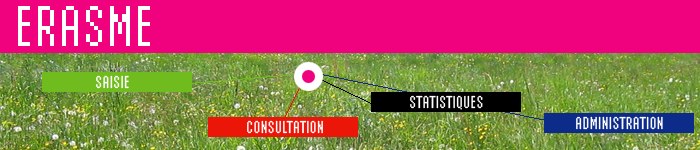
<style>
.page{position:relative;width:700px;height:150px;background:#f0027f}
.page>*{position:absolute;margin:0}
.t1{font:60px "LoResFifTeenNarrow";color:#ffffff}
.t2{font:18px "LoResFifTeenNarrow";color:#ffffff}
</style>
<div class="page">
<p class="t1" style="left:18px;top:6px;width:132px;height:40px">ERASME</p>
<p class="t2" style="left:96px;top:75px;width:33px;height:14px">SAISIE</p>
<p class="t2" style="left:410px;top:95px;width:73px;height:15px">STATISTIQUES</p>
<p class="t2" style="left:247px;top:120px;width:76px;height:14px">CONSULTATION</p>
<p class="t2" style="left:576px;top:116px;width:87px;height:14px">ADMINISTRATION</p>
</div>
